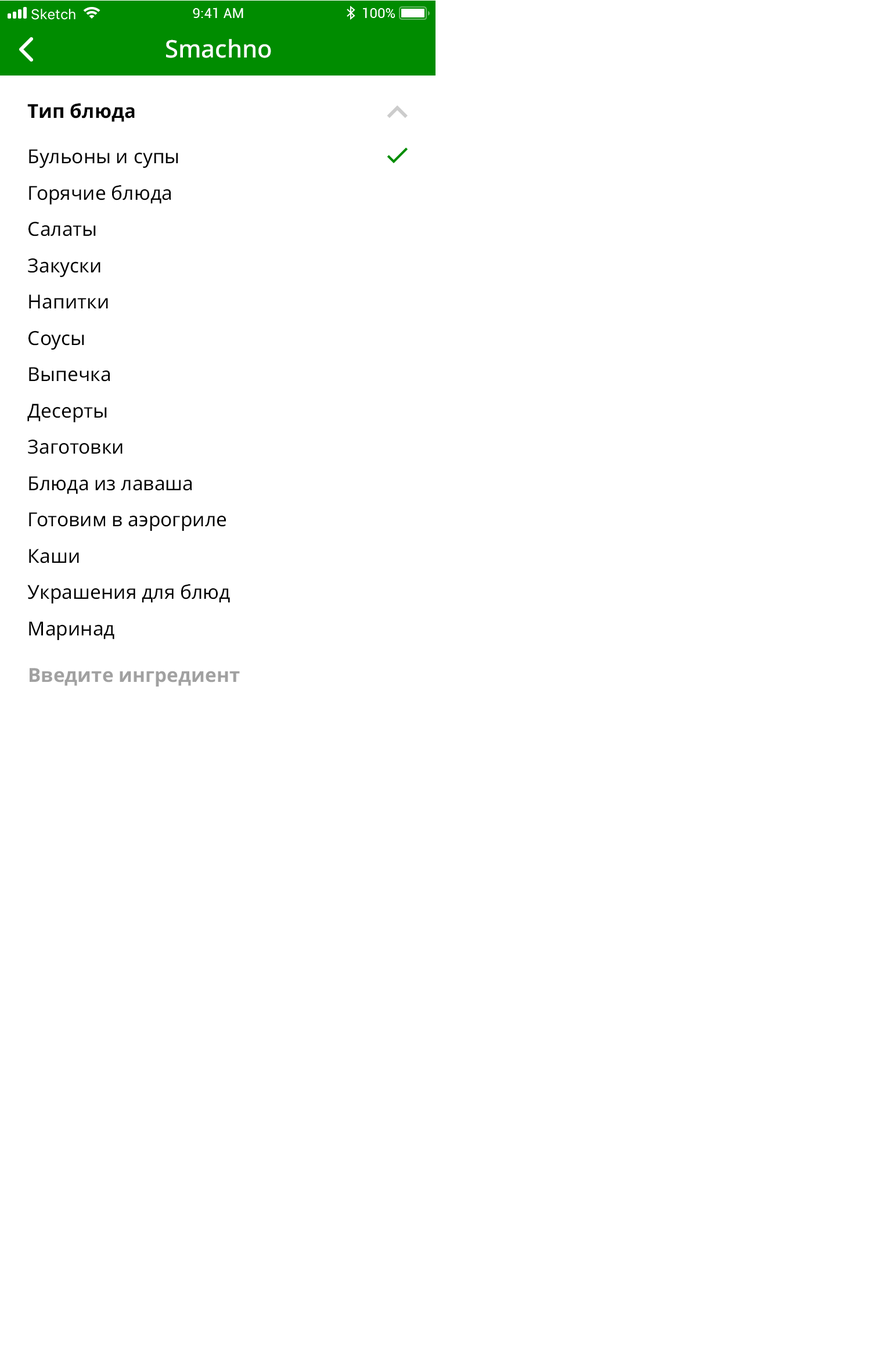
<style>
.page{position:relative;width:871px;height:1369px;background:#ffffff}
.page>*{position:absolute;margin:0}
.t1{font:24.2px "NotoSans-Medium";color:#ffffff}
.t2{font:19.4px "NotoSans-Bold";color:#000000}
.t3{font:19.4px/36.3px "NotoSans-Regular";color:#000000}
.t4{font:19.4px "NotoSans-Bold";color:#a1a1a1}
</style>
<div class="page">
<p class="t1" style="left:166px;top:39px;width:105px;height:19px">Smachno</p>
<p class="t2" style="left:27px;top:103px;width:108px;height:19px">Тип блюда</p>
<p class="t3" style="left:27px;top:149px;width:203px;height:491px">Бульоны и супы  <br>Горячие блюда  <br>Салаты  <br>Закуски  <br>Напитки  <br>Соусы  <br>Выпечка  <br>Десерты <br>Заготовки  <br>Блюда из лаваша  <br>Готовим в аэрогриле  <br>Каши  <br>Украшения для блюд<br>Маринад</p>
<p class="t4" style="left:30px;top:668px;width:210px;height:18px">Введите ингредиент</p>
</div>
